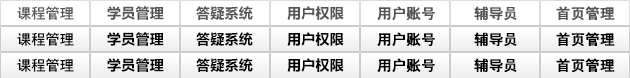
<style>
.page{position:relative;width:630px;height:78px;background:#ffffff}
.page>*{position:absolute;margin:0}
.t1{font:14px "CTCuHeiSJ";letter-spacing:0.02em;color:#555555}
.t2{font:14px "MicrosoftYaHei";letter-spacing:0.02em;color:#555555}
.t3{font:14px "CTCuHeiSJ";letter-spacing:0.02em;color:#555555;font-weight:bold}
.t4{font:14px "CTCuHeiSJ";letter-spacing:0.02em;color:#000000}
.t5{font:14px "MicrosoftYaHei";letter-spacing:0.02em;color:#000000}
.t6{font:14px "CTCuHeiSJ";letter-spacing:0.02em;color:#000000;font-weight:bold}
</style>
<div class="page">
<p class="t1" style="left:17px;top:6px;width:57px;height:14px">课程管理</p>
<p class="t2" style="left:107px;top:6px;width:57px;height:14px">学员管理</p>
<p class="t2" style="left:196px;top:6px;width:57px;height:14px">答疑系统</p>
<p class="t2" style="left:287px;top:6px;width:57px;height:14px">用户权限</p>
<p class="t3" style="left:377px;top:6px;width:58px;height:14px">用户账号</p>
<p class="t3" style="left:474px;top:6px;width:43px;height:14px">辅导员</p>
<p class="t3" style="left:556px;top:6px;width:59px;height:14px">首页管理</p>
<p class="t4" style="left:17px;top:32px;width:57px;height:14px">课程管理</p>
<p class="t5" style="left:107px;top:32px;width:57px;height:14px">学员管理</p>
<p class="t5" style="left:196px;top:32px;width:57px;height:14px">答疑系统</p>
<p class="t5" style="left:287px;top:32px;width:57px;height:14px">用户权限</p>
<p class="t6" style="left:377px;top:32px;width:58px;height:14px">用户账号</p>
<p class="t6" style="left:474px;top:32px;width:43px;height:14px">辅导员</p>
<p class="t6" style="left:556px;top:32px;width:59px;height:14px">首页管理</p>
<p class="t4" style="left:17px;top:58px;width:57px;height:14px">课程管理</p>
<p class="t5" style="left:107px;top:58px;width:57px;height:14px">学员管理</p>
<p class="t5" style="left:196px;top:58px;width:57px;height:14px">答疑系统</p>
<p class="t5" style="left:287px;top:58px;width:57px;height:14px">用户权限</p>
<p class="t6" style="left:377px;top:58px;width:58px;height:14px">用户账号</p>
<p class="t6" style="left:474px;top:58px;width:43px;height:14px">辅导员</p>
<p class="t6" style="left:556px;top:58px;width:59px;height:14px">首页管理</p>
</div>
